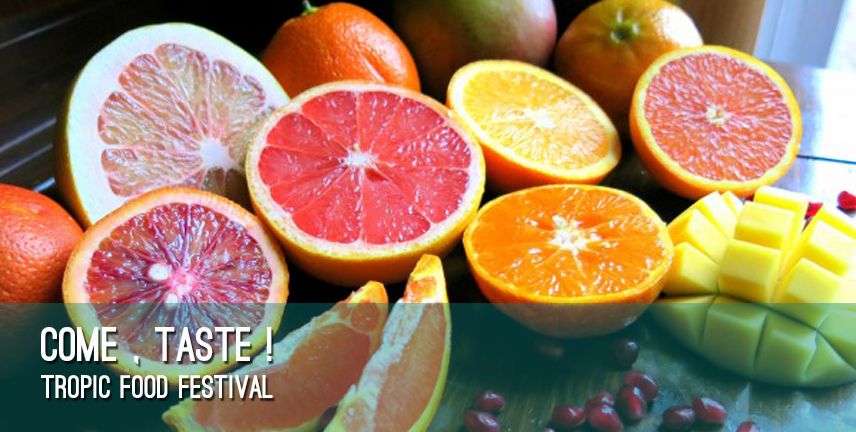
<style>
.page{position:relative;width:856px;height:432px}
.page>*{position:absolute;margin:0}
.t1{font:31px "OstrichSans-Black";color:#fcfcfc}
.t2{font:46px "OstrichSans-Black";color:#fcfcfc}
</style>
<div class="page">
<p class="t1" style="left:41px;top:327px;width:232px;height:71px"><span class="t2">come , taste ! <br></span>tropic food festival</p>
</div>
